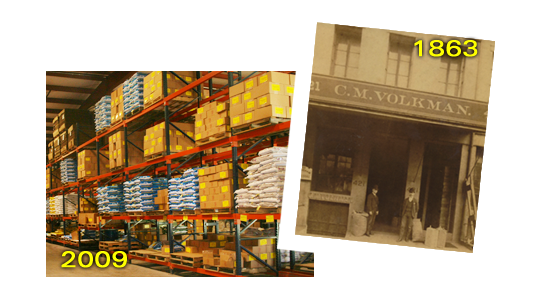
<style>
.page{position:relative;width:535px;height:307px;background:#ffffff}
.page>*{position:absolute;margin:0}
.t1{font:22.7px "ZurichBT-RomanExtended";color:#feff00;font-weight:bold}
</style>
<div class="page">
<p class="t1" style="left:414px;top:40px;width:64px;height:17px">1863</p>
<p class="t1" style="left:61px;top:251px;width:66px;height:17px">2009</p>
</div>
